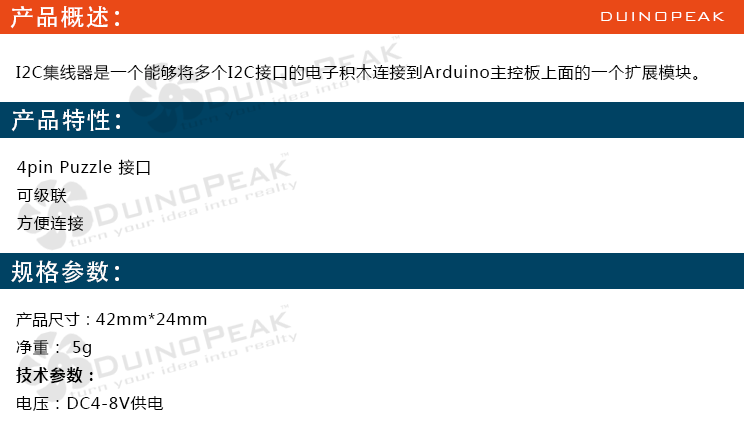
<style>
.page{position:relative;width:744px;height:425px;background:#ffffff}
.page>*{position:absolute;margin:0}
.t1{font:24px "AdobeHeitiStd-Regular";letter-spacing:0.05em;color:#ffffff}
.t2{font:18px "BankGothicBT-Light";letter-spacing:0.05em;color:#ffffff}
.t3{font:16px "MicrosoftYaHei";letter-spacing:0.05em;color:#000000}
.t4{font:16px "MicrosoftYaHei";color:#000000}
.t5{font:16px "MicrosoftYaHei-Bold";letter-spacing:0.05em;color:#000000}
</style>
<div class="page">
<p class="t1" style="left:10px;top:6px;width:109px;height:23px">产品概述：</p>
<p class="t2" style="left:601px;top:12px;width:124px;height:9px">DUINOPEAK</p>
<p class="t3" style="left:16px;top:64px;width:682px;height:17px">I2C集线器是一个能够将多个I2C接口的电子积木连接到Arduino主控板上面的一个扩展模块。</p>
<p class="t1" style="left:11px;top:108px;width:109px;height:24px">产品特性：</p>
<p class="t3" style="left:17px;top:159px;width:133px;height:72px">4pin Puzzle 接口<br>可级联<br>方便连接</p>
<p class="t1" style="left:11px;top:260px;width:108px;height:23px">规格参数：</p>
<p class="t3" style="left:16px;top:312px;width:191px;height:99px"><span class="t4">产品尺寸：</span>42mm*24mm<br>净重： 5g<br><span class="t5">技术参数：<br></span>电压：DC4-8V供电</p>
</div>
